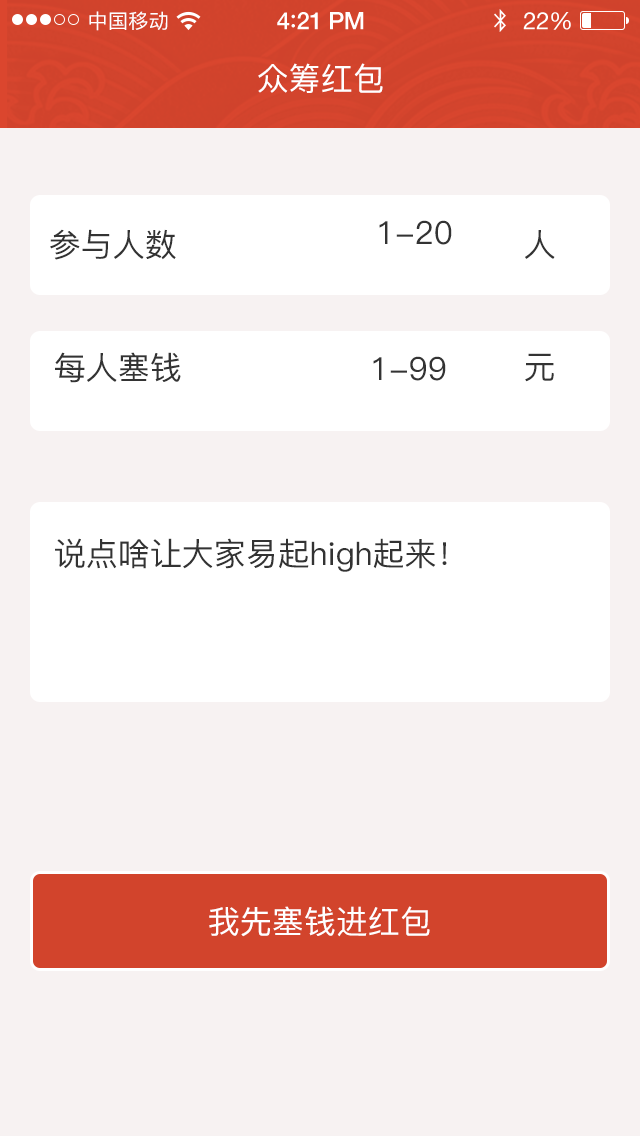
<style>
.page{position:relative;width:640px;height:1136px;background:#f7f2f2}
.page>*{position:absolute;margin:0}
.t1{font:20px "PingFang-SC-Medium";letter-spacing:0.02em;color:#ffffff}
.t2{font:24px "HelveticaNeue-Medium";letter-spacing:-0.02em;color:#ffffff}
.t3{font:26px "Avenir-Medium";letter-spacing:-0.02em;color:#ffffff}
.t4{font:24px "HelveticaNeue";letter-spacing:-0.02em;color:#ffffff}
.t5{font:32px "PingFang-SC-Medium";color:#ffffff}
.t6{font:32px "PingFang-SC-Medium";color:#333333}
</style>
<div class="page">
<p class="t1" style="left:89px;top:11px;width:79px;height:20px">中国移动</p>
<p class="t2" style="left:277px;top:12px;width:87px;height:18px">4<span class="t3">:</span>21 PM</p>
<p class="t4" style="left:523px;top:12px;width:48px;height:18px">22%</p>
<p class="t5" style="left:258px;top:63px;width:125px;height:30px">众筹红包</p>
<p class="t6" style="left:379px;top:220px;width:73px;height:25px">1-20</p>
<p class="t6" style="left:50px;top:229px;width:126px;height:31px">参与人数</p>
<p class="t6" style="left:525px;top:230px;width:30px;height:29px">人</p>
<p class="t6" style="left:55px;top:352px;width:126px;height:31px">每人塞钱</p>
<p class="t6" style="left:525px;top:353px;width:29px;height:29px">元</p>
<p class="t6" style="left:373px;top:356px;width:73px;height:25px">1-99</p>
<p class="t6" style="left:55px;top:538px;width:392px;height:34px">说点啥让大家易起high起来！</p>
<p class="t5" style="left:209px;top:906px;width:221px;height:31px">我先塞钱进红包</p>
</div>
